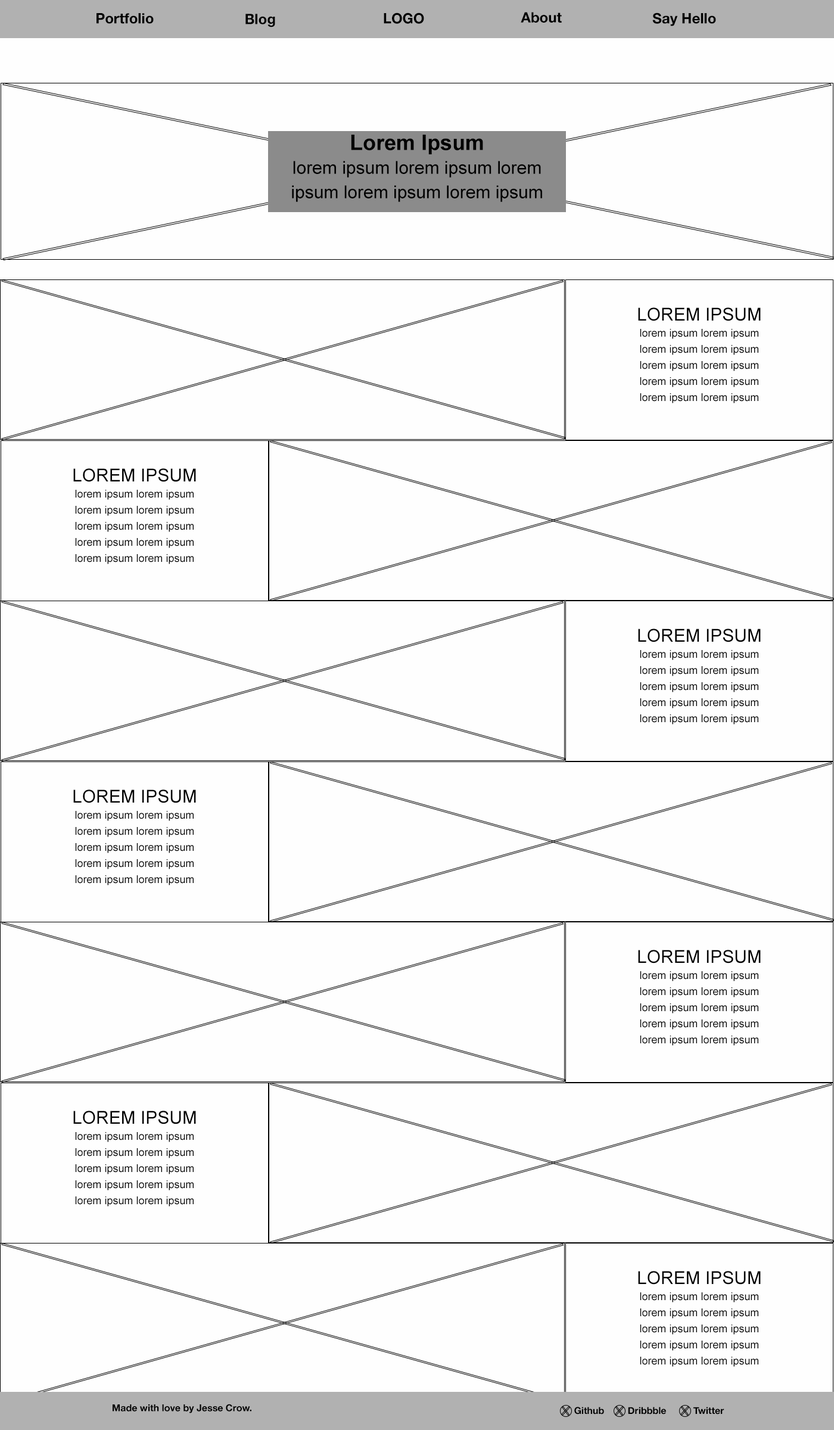
<style>
.page{position:relative;width:834px;height:1430px;background:#fefefe}
.page>*{position:absolute;margin:0}
.t1{font:14.3px "HelveticaNeue-Bold";color:#000000}
.t2{font:17.9px/23.8px "ArialMT";color:#000000}
.t3{font:21.4px/24.4px "Arial-BoldMT";color:#000000}
.t4{font:10.7px/16.1px "ArialMT";color:#000000}
.t5{font:9.5px "HelveticaNeue-Bold";color:#000000}
</style>
<div class="page">
<p class="t1" style="left:97px;top:13px;width:57px;height:11px">Portfolio</p>
<p class="t1" style="left:245px;top:14px;width:30px;height:13px">Blog</p>
<p class="t1" style="left:384px;top:13px;width:40px;height:11px">LOGO</p>
<p class="t1" style="left:521px;top:12px;width:41px;height:11px">About</p>
<p class="t1" style="left:652px;top:13px;width:64px;height:13px">Say Hello</p>
<p class="t2" style="left:292px;top:135px;width:250px;height:67px;text-align:center"><span class="t3">Lorem Ipsum<br></span>lorem ipsum lorem ipsum lorem ipsum lorem ipsum lorem ipsum</p>
<p class="t4" style="left:638px;top:307px;width:123px;height:96px;text-align:center"><span class="t2">LOREM IPSUM<br></span>lorem ipsum lorem ipsum lorem ipsum lorem ipsum lorem ipsum lorem ipsum lorem ipsum lorem ipsum lorem ipsum lorem ipsum</p>
<p class="t4" style="left:73px;top:468px;width:123px;height:96px;text-align:center"><span class="t2">LOREM IPSUM<br></span>lorem ipsum lorem ipsum lorem ipsum lorem ipsum lorem ipsum lorem ipsum lorem ipsum lorem ipsum lorem ipsum lorem ipsum</p>
<p class="t4" style="left:638px;top:628px;width:123px;height:96px;text-align:center"><span class="t2">LOREM IPSUM<br></span>lorem ipsum lorem ipsum lorem ipsum lorem ipsum lorem ipsum lorem ipsum lorem ipsum lorem ipsum lorem ipsum lorem ipsum</p>
<p class="t4" style="left:73px;top:789px;width:123px;height:96px;text-align:center"><span class="t2">LOREM IPSUM<br></span>lorem ipsum lorem ipsum lorem ipsum lorem ipsum lorem ipsum lorem ipsum lorem ipsum lorem ipsum lorem ipsum lorem ipsum</p>
<p class="t4" style="left:638px;top:950px;width:123px;height:96px;text-align:center"><span class="t2">LOREM IPSUM<br></span>lorem ipsum lorem ipsum lorem ipsum lorem ipsum lorem ipsum lorem ipsum lorem ipsum lorem ipsum lorem ipsum lorem ipsum</p>
<p class="t4" style="left:73px;top:1110px;width:123px;height:96px;text-align:center"><span class="t2">LOREM IPSUM<br></span>lorem ipsum lorem ipsum lorem ipsum lorem ipsum lorem ipsum lorem ipsum lorem ipsum lorem ipsum lorem ipsum lorem ipsum</p>
<p class="t4" style="left:638px;top:1271px;width:123px;height:96px;text-align:center"><span class="t2">LOREM IPSUM<br></span>lorem ipsum lorem ipsum lorem ipsum lorem ipsum lorem ipsum lorem ipsum lorem ipsum lorem ipsum lorem ipsum lorem ipsum</p>
<p class="t5" style="left:113px;top:1404px;width:138px;height:9px">Made with love by Jesse Crow.</p>
<p class="t5" style="left:574px;top:1407px;width:30px;height:7px">Github</p>
<p class="t5" style="left:628px;top:1407px;width:38px;height:7px">Dribbble</p>
<p class="t5" style="left:693px;top:1407px;width:31px;height:7px">Twitter</p>
</div>
